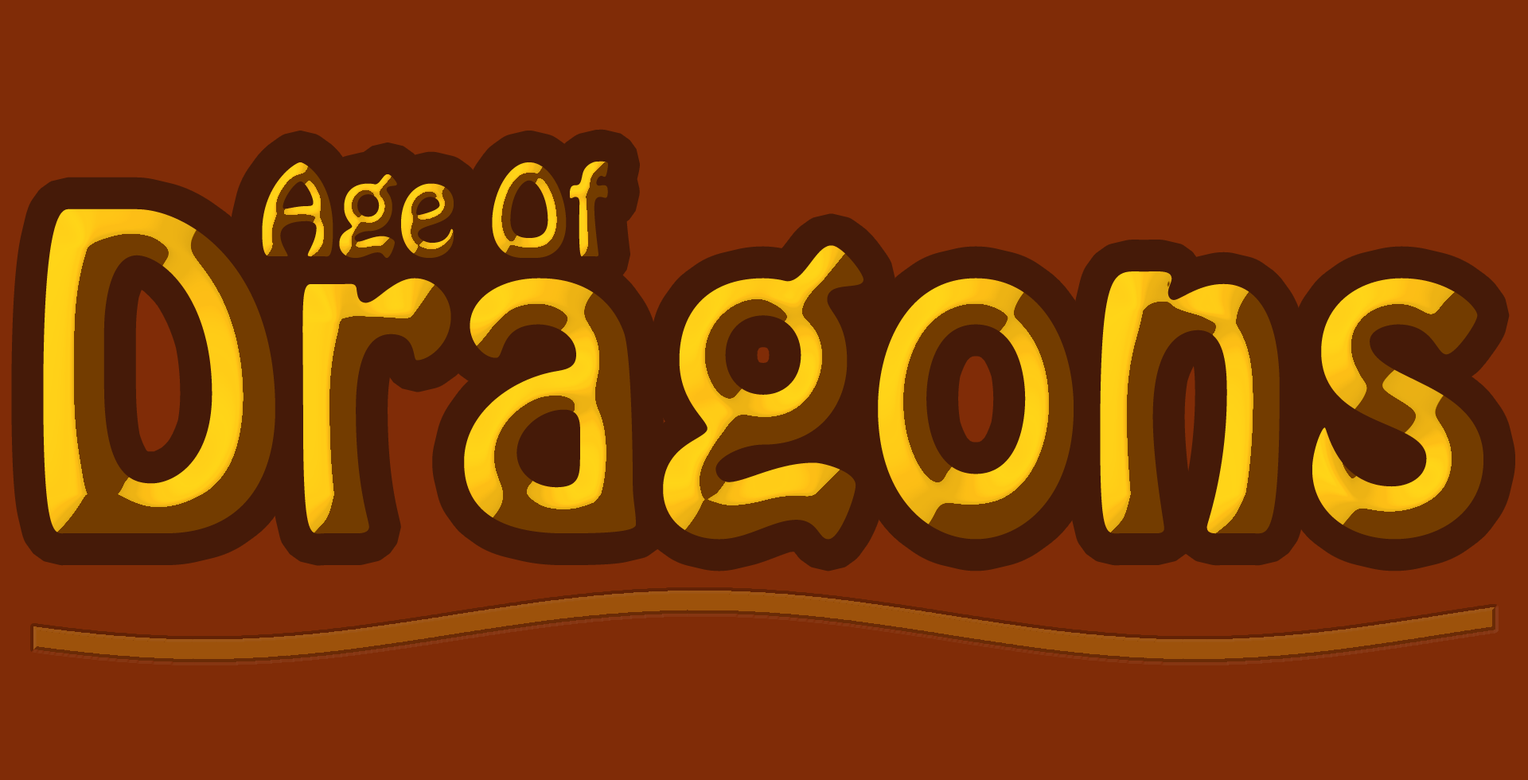
<style>
.page{position:relative;width:1528px;height:780px;background:#802c07}
.page>*{position:absolute;margin:0}
.t1{font:111.1px "HoboStd"}
.t2{font:389.3px "HoboStd"}
</style>
<div class="page">
<p class="t1" style="left:262px;top:161px;width:346px;height:97px">Age Of</p>
<p class="t2" style="left:43px;top:209px;width:1441px;height:331px">Dragons</p>
</div>
